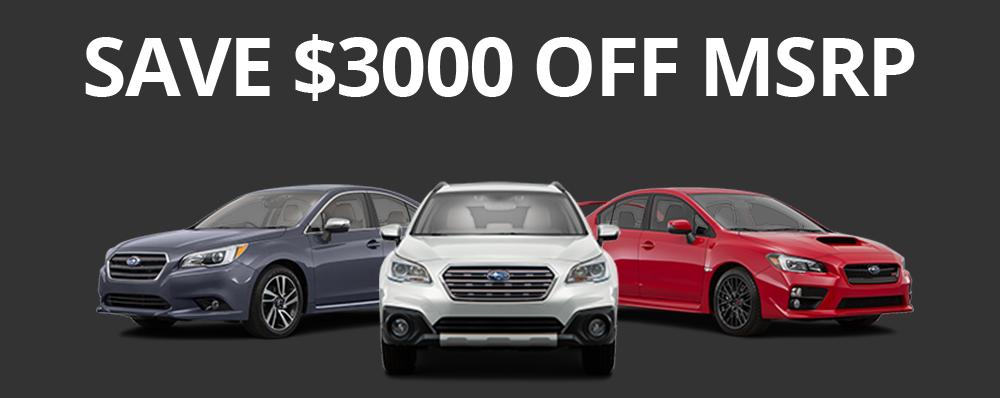
<style>
.page{position:relative;width:1000px;height:398px;background:#333333}
.page>*{position:absolute;margin:0}
.t1{font:81.1px "OpenSans-Bold";letter-spacing:-0.025em;color:#ffffff}
</style>
<div class="page">
<p class="t1" style="left:85px;top:34px;width:830px;height:67px">SAVE $3000 OFF MSRP</p>
</div>
